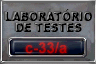
<style>
.page{position:relative;width:96px;height:64px}
.page>*{position:absolute;margin:0}
.t1{font:12px/11.3px "Arial-Black";scale:0.9 1}
</style>
<div class="page">
<p class="t1" style="left:5px;top:9px;width:87px;height:23px;text-align:center">LABORATÓRIO<br>DE TESTES</p>
</div>
